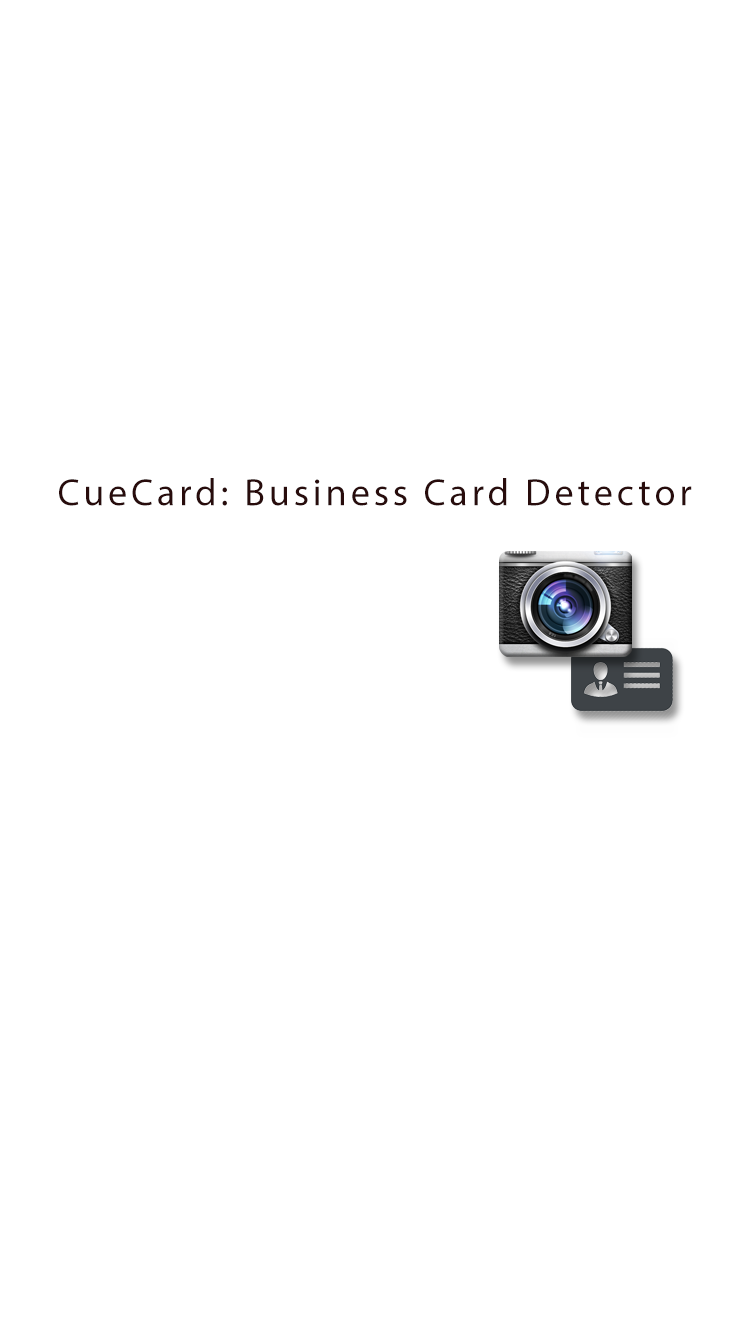
<style>
.page{position:relative;width:750px;height:1334px;background:#ffffff}
.page>*{position:absolute;margin:0}
.t1{font:38.3px "MyriadPro-Regular";letter-spacing:0.1em;color:#280c0c}
</style>
<div class="page">
<p class="t1" style="left:59px;top:478px;width:633px;height:28px">CueCard: Business Card Detector</p>
</div>
